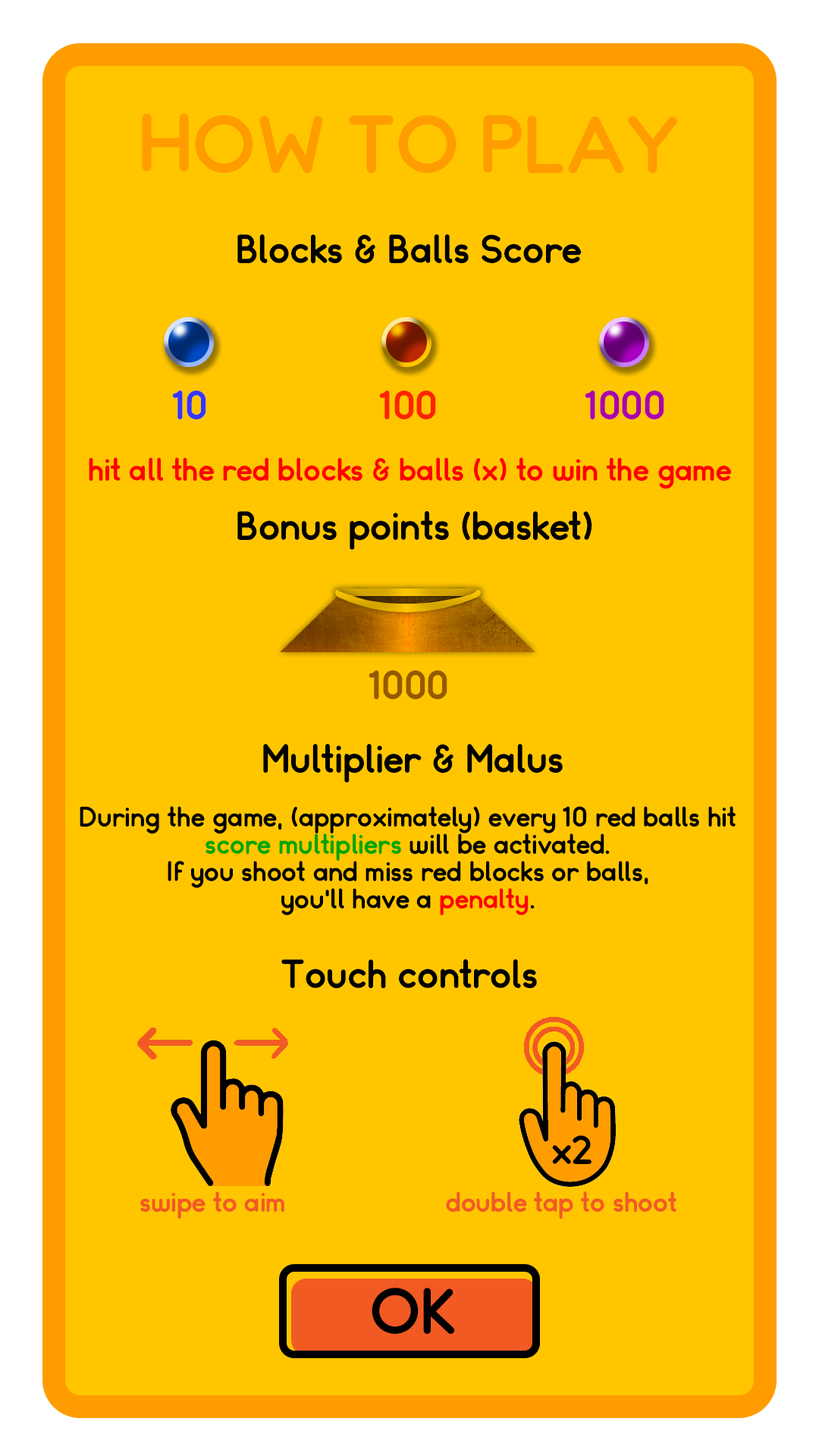
<style>
.page{position:relative;width:819px;height:1456px;background:#ffc600}
.page>*{position:absolute;margin:0}
.t1{font:75.8px "Somatic-Rounded";color:#ff9c00}
.t2{font:37.9px "Somatic-Rounded";color:#000000}
.t3{font:37.9px "Somatic-Rounded";color:#3636ff}
.t4{font:37.9px "Somatic-Rounded";color:#fe2400}
.t5{font:37.9px "Somatic-Rounded";color:#ab00ad}
.t6{font:30.3px "Somatic-Rounded";color:#ff0000}
.t7{font:37.9px "Somatic-Rounded";color:#955a00}
.t8{font:26.5px/27.3px "Somatic-Rounded";color:#000000}
.t9{font:26.5px/27.3px "Somatic-Rounded";color:#01a601}
.t10{font:26.5px/27.3px "Somatic-Rounded";color:#ff0000}
.t11{font:26.5px "Somatic-Rounded";color:#f25a24}
</style>
<div class="page">
<p class="t1" style="left:142px;top:113px;width:535px;height:61px">HOW TO PLAY</p>
<p class="t2" style="left:237px;top:234px;width:345px;height:30px">Blocks &amp; Balls Score</p>
<p class="t3" style="left:172px;top:391px;width:34px;height:28px">10</p>
<p class="t4" style="left:379px;top:391px;width:57px;height:28px">100</p>
<p class="t5" style="left:585px;top:391px;width:79px;height:28px">1000</p>
<p class="t6" style="left:89px;top:457px;width:642px;height:32px">hit all the red blocks &amp; balls (x) to win the game</p>
<p class="t2" style="left:237px;top:511px;width:355px;height:39px">Bonus points (basket)</p>
<p class="t7" style="left:369px;top:670px;width:78px;height:29px">1000</p>
<p class="t2" style="left:263px;top:744px;width:300px;height:39px">Multiplier &amp; Malus</p>
<p class="t8" style="left:80px;top:806px;width:656px;height:109px;text-align:center">During the game, (approximately) every 10 red balls hit<br><span class="t9">score multipliers</span> will be activated.<br>If you shoot and miss red blocks or balls,<br>you'll have a <span class="t10">penalty</span>.</p>
<p class="t2" style="left:281px;top:959px;width:256px;height:30px">Touch controls</p>
<p class="t11" style="left:140px;top:1191px;width:144px;height:28px">swipe to aim</p>
<p class="t11" style="left:446px;top:1191px;width:230px;height:28px">double tap to shoot</p>
</div>
